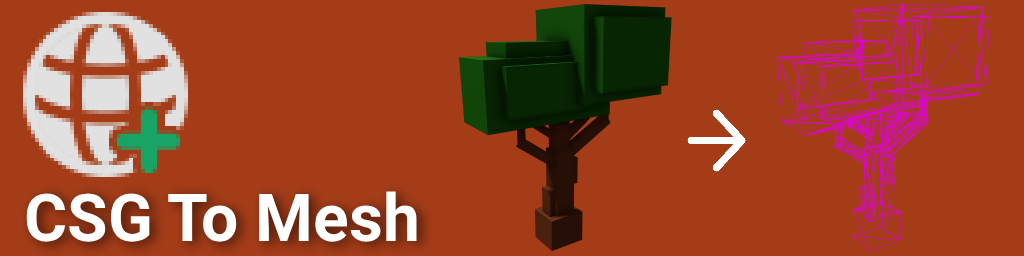
<style>
.page{position:relative;width:1024px;height:256px;background:#a43c18}
.page>*{position:absolute;margin:0}
.t1{font:66px "Roboto-Bold";color:#ffffff}
</style>
<div class="page">
<p class="t1" style="left:26px;top:191px;width:391px;height:51px">CSG To Mesh</p>
</div>
